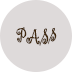
<style>
.page{position:relative;width:72px;height:72px;background:#dedada}
.page>*{position:absolute;margin:0}
.t1{font:15.5px "Gigi-Regular";color:#3f280d}
</style>
<div class="page">
<p class="t1" style="left:16px;top:27px;width:41px;height:19px">PASS</p>
</div>
